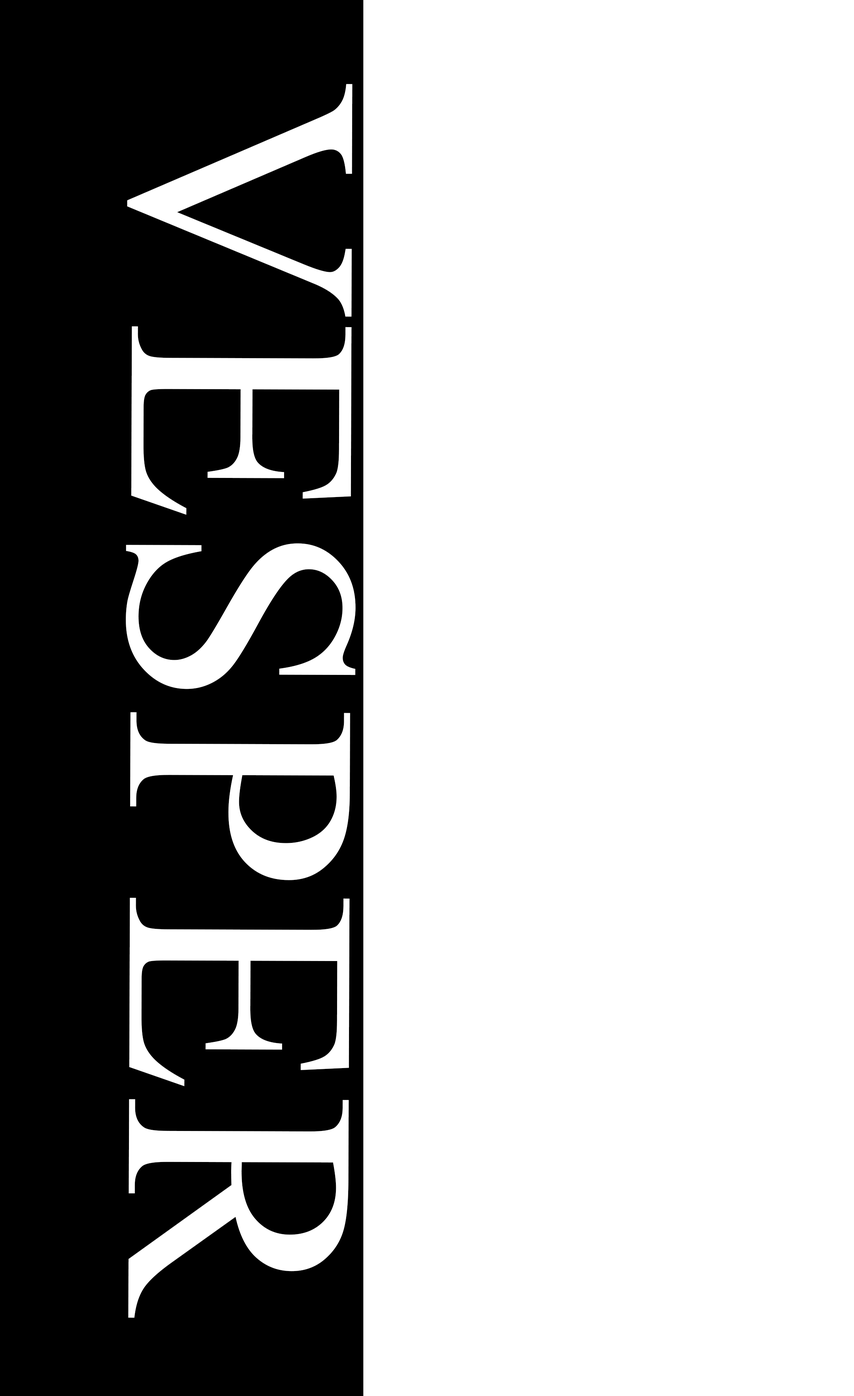
<style>
.page{position:relative;width:854px;height:1396px;background:#ffffff}
.page>*{position:absolute;margin:0}
.t1{font:331.7px "TimesNewRomanPSMT";color:#ffffff}
</style>
<div class="page">
<p class="t1" style="left:126px;top:84px;width:230px;height:1234px;rotate:90deg">VESPER</p>
</div>
